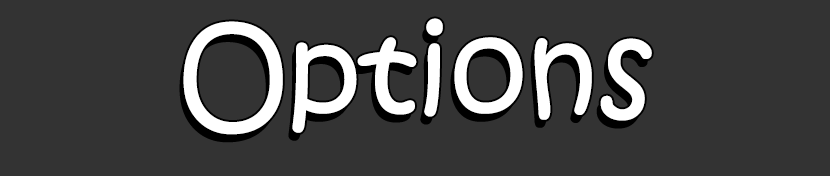
<style>
.page{position:relative;width:830px;height:176px;background:#333333}
.page>*{position:absolute;margin:0}
.t1{font:124.4px "KristenITC-Regular";color:#ffffff}
</style>
<div class="page">
<p class="t1" style="left:183px;top:18px;width:469px;height:117px">Options</p>
</div>
